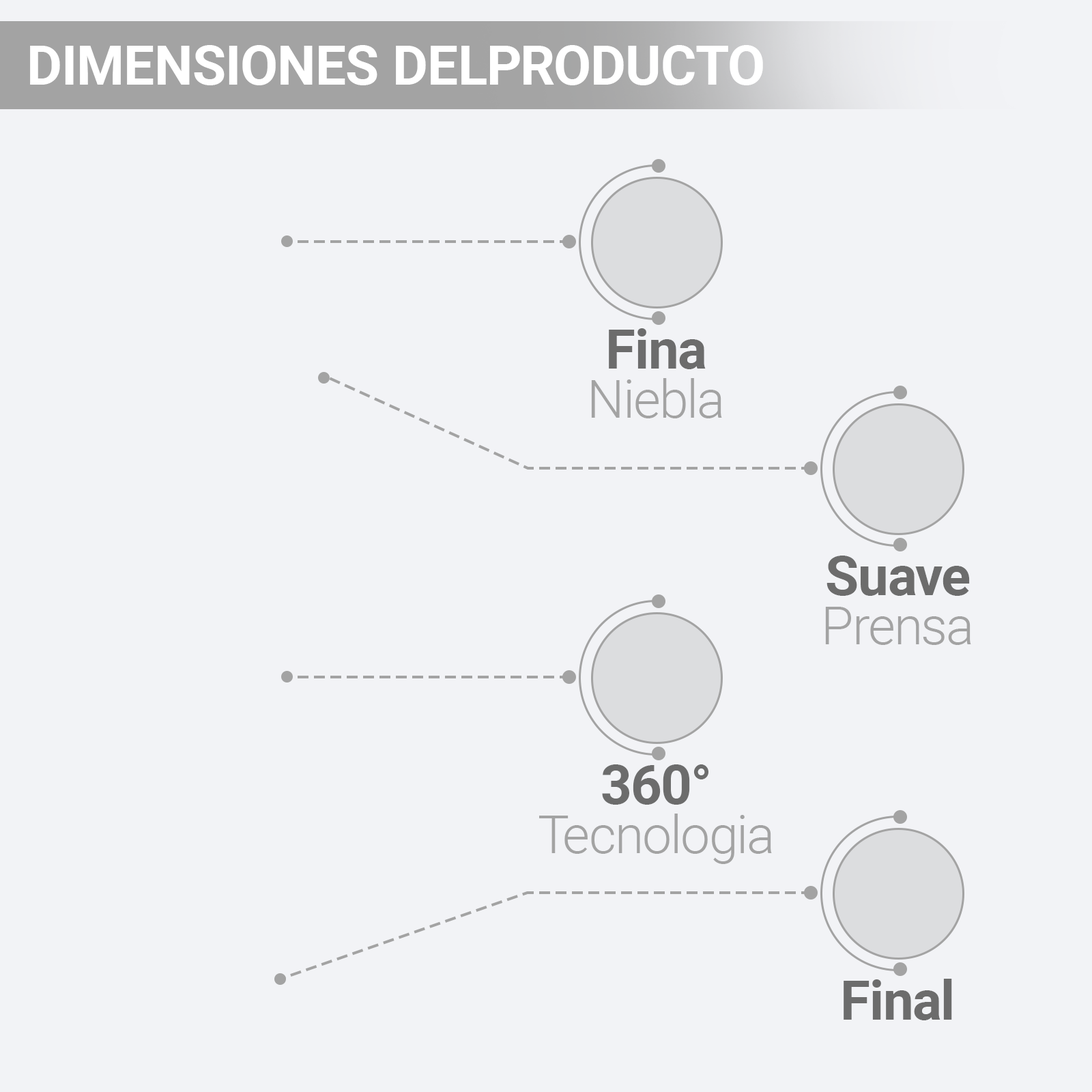
<style>
.page{position:relative;width:1092px;height:1092px;background:#f2f3f6}
.page>*{position:absolute;margin:0}
.t1{font:54.6px "Roboto-Bold";color:#ffffff}
.t2{font:54.6px "Roboto-Bold";color:#6c6c6c}
.t3{font:52.6px "Roboto-Light";color:#a3a3a3}
</style>
<div class="page">
<p class="t1" style="left:30px;top:45px;width:733px;height:40px">DIMENSIONES DELPRODUCTO</p>
<p class="t2" style="left:609px;top:328px;width:97px;height:41px">Fina</p>
<p class="t3" style="left:591px;top:378px;width:131px;height:40px">Niebla</p>
<p class="t2" style="left:826px;top:556px;width:144px;height:40px">Suave</p>
<p class="t3" style="left:825px;top:607px;width:146px;height:38px">Prensa</p>
<p class="t2" style="left:602px;top:764px;width:106px;height:41px">360°</p>
<p class="t3" style="left:539px;top:814px;width:233px;height:50px">Tecnologia</p>
<p class="t2" style="left:844px;top:979px;width:108px;height:41px">Final</p>
</div>
